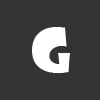
<style>
.page{position:relative;width:100px;height:100px;background:#333333}
.page>*{position:absolute;margin:0}
.t1{font:58.3px "ShowcardGothic-Reg";color:#ffffff}
</style>
<div class="page">
<p class="t1" style="left:32px;top:27px;width:38px;height:46px">g</p>
</div>
